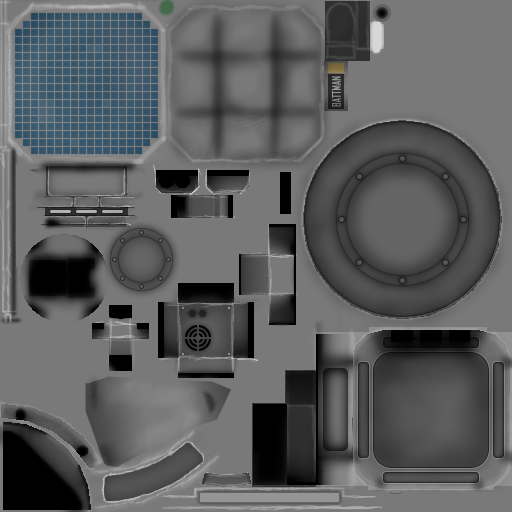
<style>
.page{position:relative;width:512px;height:512px;background:#797979}
.page>*{position:absolute;margin:0}
.t1{font:11.1px "AgencyFB-Reg";color:#9a9a9a}
</style>
<div class="page">
<p class="t1" style="left:332px;top:76px;width:9px;height:31px;rotate:-90deg">BATTMAN</p>
</div>
